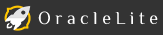
<style>
.page{position:relative;width:163px;height:35px;background:#333333}
.page>*{position:absolute;margin:0}
.t1{font:18px "Philosopher-Regular";letter-spacing:0.25em;color:#ffffff}
</style>
<div class="page">
<p class="t1" style="left:38px;top:11px;width:120px;height:14px">OracleLite</p>
</div>
